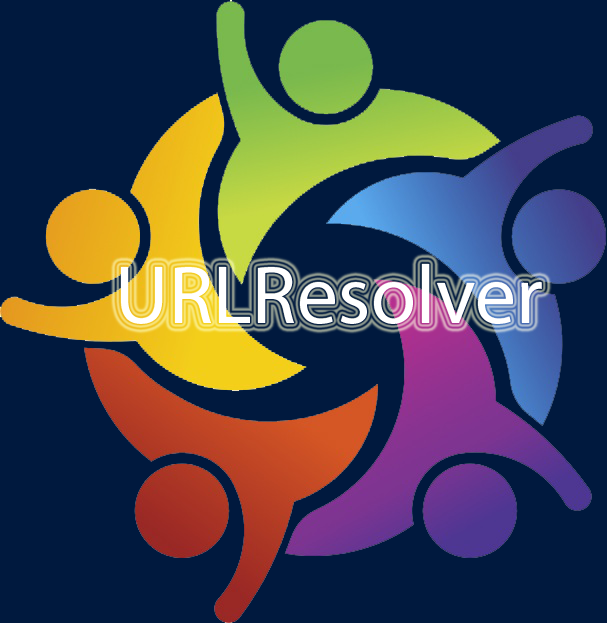
<style>
.page{position:relative;width:607px;height:623px;background:#00193e}
.page>*{position:absolute;margin:0}
.t1{font:82.5px "MyriadPro-Regular";color:#ffffff}
</style>
<div class="page">
<p class="t1" style="left:121px;top:264px;width:421px;height:60px">URLResolver</p>
</div>
